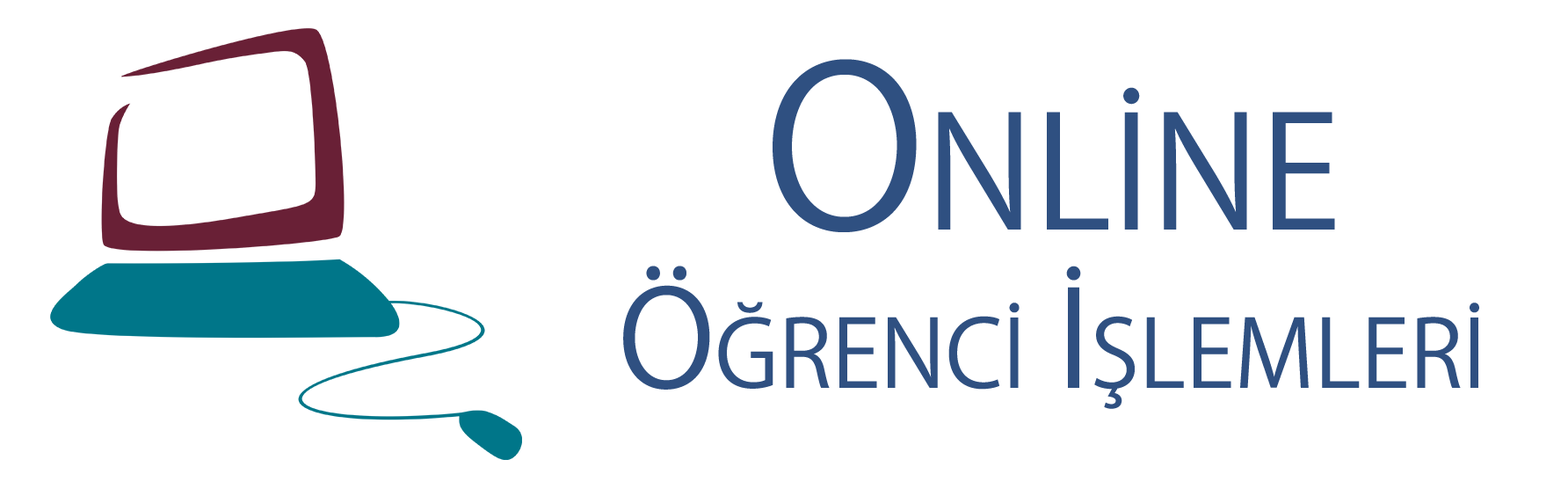
<style>
.page{position:relative;width:1568px;height:489px;background:#ffffff}
.page>*{position:absolute;margin:0}
.t1{font:131.8px "KozGoPr6N-Regular";color:#2f5081;font-variant:small-caps}
.t2{font:219.7px "KozGoPr6N-Regular";color:#2f5081;font-variant:small-caps}
</style>
<div class="page">
<p class="t1" style="left:623px;top:59px;width:856px;height:350px;text-align:center"><span class="t2">Online<br></span>Öğrenci İşlemleri</p>
</div>
